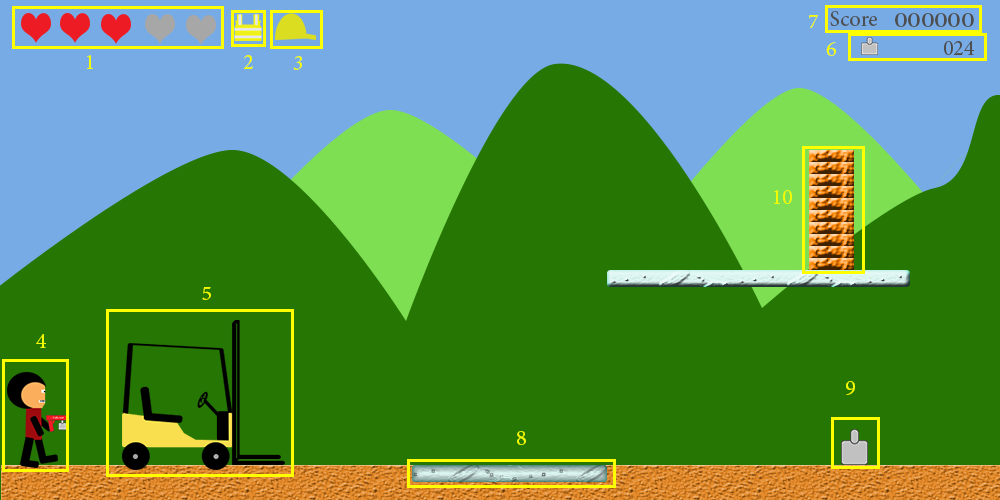
<style>
.page{position:relative;width:1000px;height:500px;background:#267604}
.page>*{position:absolute;margin:0}
.t1{font:30px "AdobeArabic-Regular";color:#f2fb02}
.t2{font:30px "AdobeArabic-Regular";color:#4e4e4e}
.t3{font:29.7px "AdobeArabic-Regular";color:#4e4e4e;scale:1.27 1}
</style>
<div class="page">
<p class="t1" style="left:809px;top:15px;width:9px;height:13px">7</p>
<p class="t2" style="left:830px;top:11px;width:47px;height:15px">Score</p>
<p class="t3" style="left:895px;top:13px;width:79px;height:14px">000000</p>
<p class="t2" style="left:944px;top:41px;width:30px;height:14px">024</p>
<p class="t1" style="left:826px;top:42px;width:10px;height:14px">6</p>
<p class="t1" style="left:87px;top:55px;width:6px;height:14px">1</p>
<p class="t1" style="left:243px;top:55px;width:10px;height:14px">2</p>
<p class="t1" style="left:293px;top:56px;width:9px;height:14px">3</p>
<p class="t1" style="left:774px;top:190px;width:18px;height:14px">10</p>
<p class="t1" style="left:202px;top:287px;width:9px;height:13px">5</p>
<p class="t1" style="left:36px;top:334px;width:10px;height:14px">4</p>
<p class="t1" style="left:846px;top:381px;width:9px;height:14px">9</p>
<p class="t1" style="left:517px;top:431px;width:9px;height:14px">8</p>
</div>
